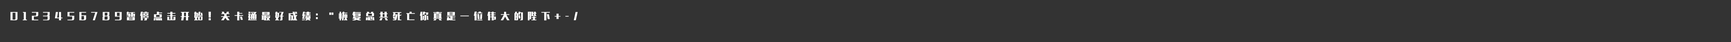
<style>
.page{position:relative;width:1731px;height:42px;background:#333333}
.page>*{position:absolute;margin:0}
.t1{font:9px "MFLiHei_Noncommercial-Regular";letter-spacing:0.5em;color:#ffffff}
</style>
<div class="page">
<p class="t1" style="left:10px;top:11px;width:568px;height:9px">0123456789暂停点击开始！关卡通最好成绩："恢复总共死亡你真是一位伟大的陛下+-/</p>
</div>
